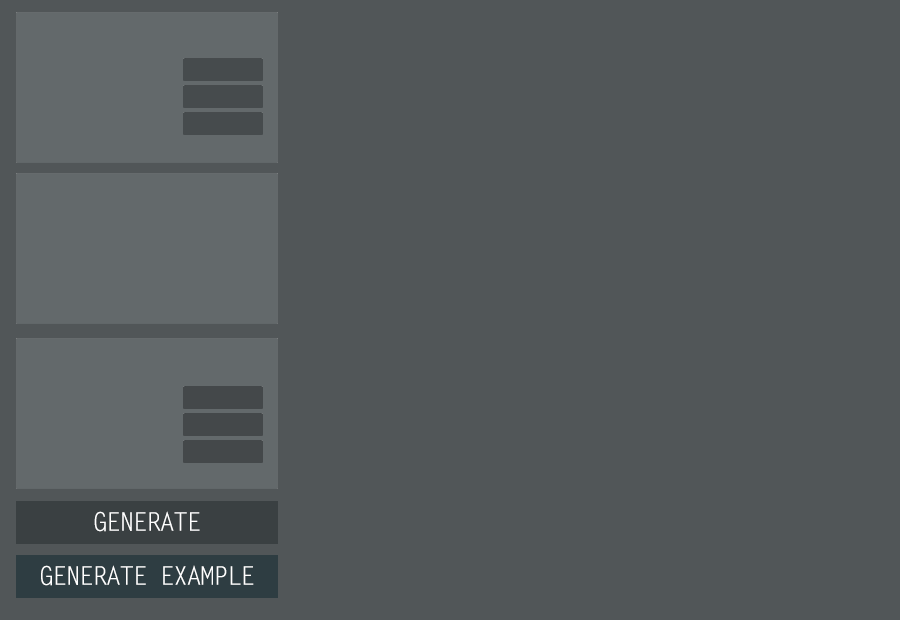
<style>
.page{position:relative;width:900px;height:620px;background:#515658}
.page>*{position:absolute;margin:0}
.t1{font:25.6px "LetterGothicStd";letter-spacing:-0.075em;color:#ffffff}
</style>
<div class="page">
<p class="t1" style="left:94px;top:511px;width:106px;height:21px">GENERATE</p>
<p class="t1" style="left:41px;top:565px;width:213px;height:21px">GENERATE EXAMPLE</p>
</div>
